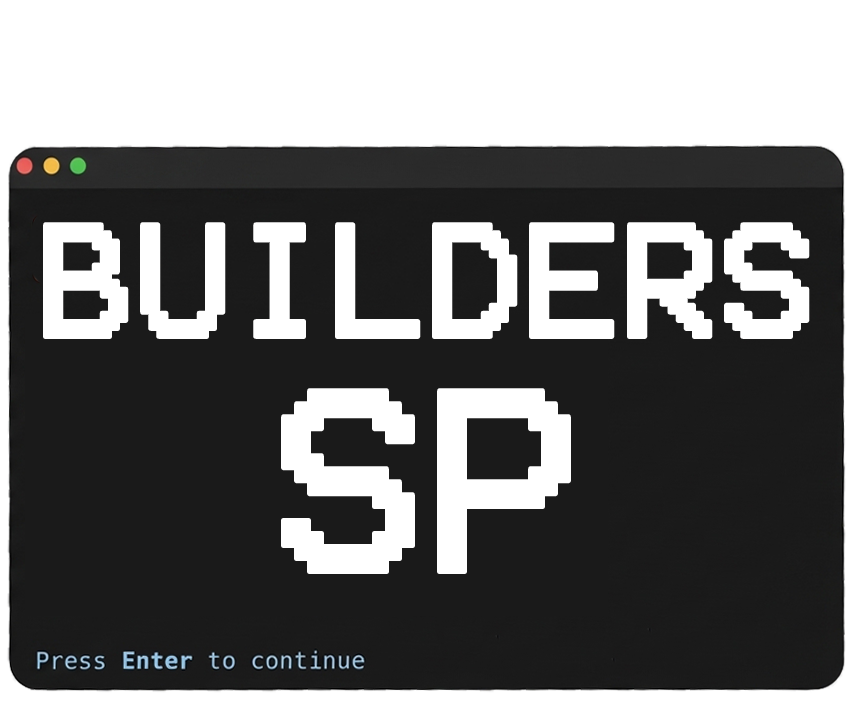
<style>
.page{position:relative;width:854px;height:705px;background:#1a1a1a}
.page>*{position:absolute;margin:0}
.t1{font:128.8px "Terminal";color:#ffffff}
.t2{font:207.6px "Terminal";color:#ffffff}
</style>
<div class="page">
<p class="t1" style="left:45px;top:224px;width:763px;height:113px">BUILDERS</p>
<p class="t2" style="left:283px;top:390px;width:286px;height:182px">SP</p>
</div>
